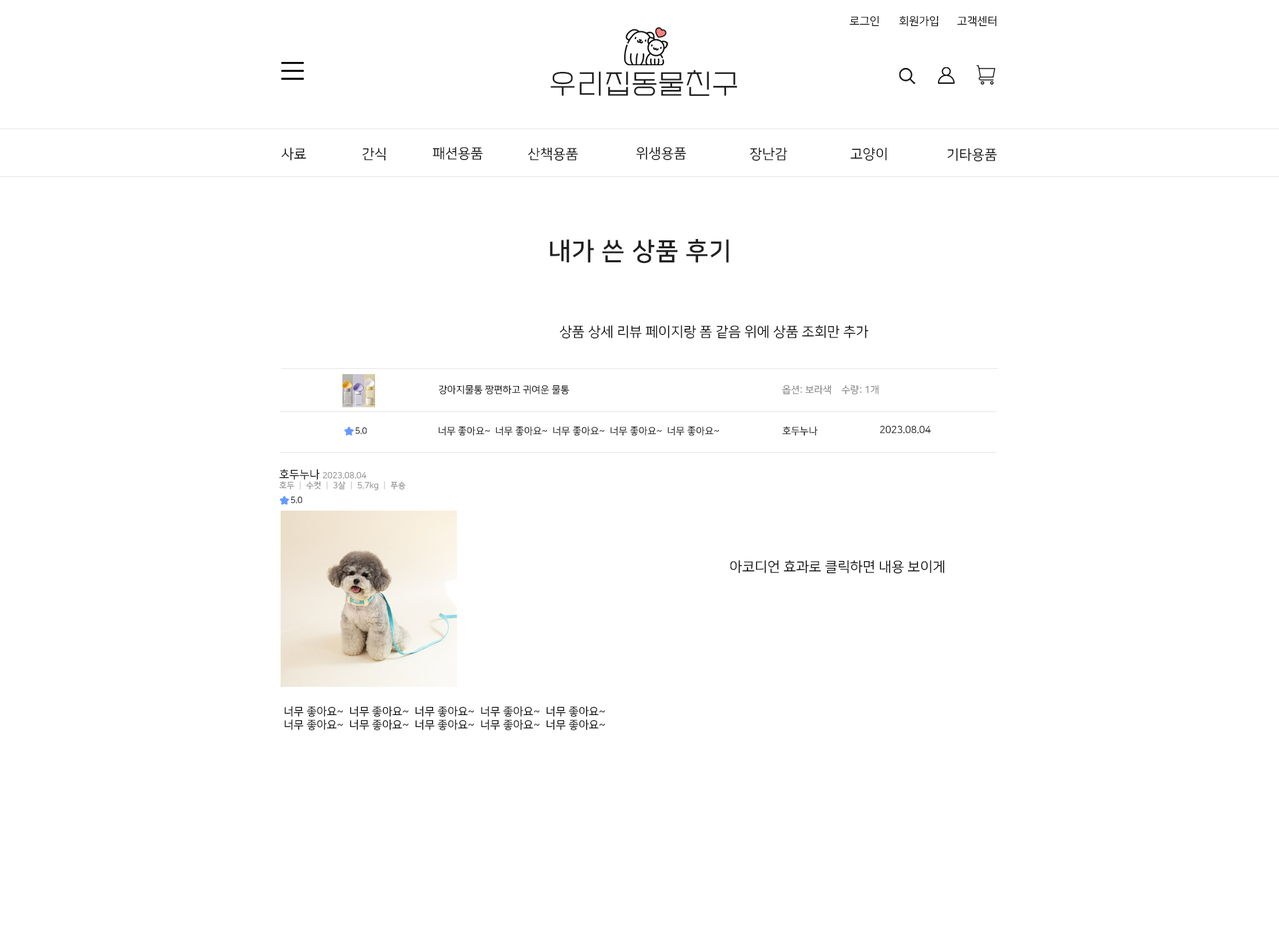
<style>
.page{position:relative;width:1279px;height:932px;background:#ffffff}
.page>*{position:absolute;margin:0}
.t1{font:11.1px "NanumSquareR";color:#000000}
.t2{font:27.8px "EF_watermelonSalad";letter-spacing:0.025em;color:#202020}
.t3{font:13.9px "NanumSquareR";color:#000000}
.t4{font:25px "NanumSquareB";letter-spacing:0.025em;color:#202020}
.t5{font:9.7px "NanumSquareR";color:#000000}
.t6{font:9.7px "NanumSquareR";color:#858585}
.t7{font:8.3px "NanumSquareR"}
.t8{font:8.3px "NanumSquareR";color:#8f8f8f}
.t9{font:8.3px "NanumSquareR";color:#d0d0d0}
</style>
<div class="page">
<p class="t1" style="left:849px;top:15px;width:30px;height:12px">로그인</p>
<p class="t1" style="left:899px;top:15px;width:39px;height:12px">회원가입</p>
<p class="t1" style="left:957px;top:15px;width:39px;height:12px">고객센터</p>
<p class="t2" style="left:550px;top:70px;width:187px;height:26px">우리집동물친구</p>
<p class="t3" style="left:281px;top:147px;width:25px;height:14px">사료</p>
<p class="t3" style="left:362px;top:147px;width:24px;height:14px">간식</p>
<p class="t3" style="left:432px;top:147px;width:51px;height:14px">패션용품</p>
<p class="t3" style="left:528px;top:147px;width:50px;height:14px">산책용품</p>
<p class="t3" style="left:636px;top:147px;width:50px;height:14px">위생용품</p>
<p class="t3" style="left:750px;top:147px;width:37px;height:14px">장난감</p>
<p class="t3" style="left:850px;top:147px;width:37px;height:14px">고양이</p>
<p class="t3" style="left:947px;top:148px;width:50px;height:14px">기타용품</p>
<p class="t4" style="left:549px;top:239px;width:180px;height:25px">내가 쓴 상품 후기</p>
<p class="t3" style="left:559px;top:325px;width:310px;height:14px">상품 상세 리뷰 페이지랑 폼 같음 위에 상품 조회만 추가</p>
<p class="t5" style="left:438px;top:385px;width:131px;height:10px">강아지물통 짱편하고 귀여운 물통</p>
<p class="t6" style="left:782px;top:385px;width:97px;height:10px">옵션: 보라색    수량: 1개</p>
<p class="t5" style="left:880px;top:426px;width:51px;height:8px">2023.08.04</p>
<p class="t7" style="left:355px;top:428px;width:12px;height:6px">5.0</p>
<p class="t5" style="left:438px;top:426px;width:281px;height:10px">너무 좋아요~  너무 좋아요~  너무 좋아요~  너무 좋아요~  너무 좋아요~</p>
<p class="t5" style="left:782px;top:426px;width:36px;height:10px">호두누나</p>
<p class="t8" style="left:279px;top:469px;width:127px;height:22px"><span class="t1">호두누나 </span>2023.08.04<br>호두 <span class="t9">ㅣ</span> 수컷 <span class="t9">ㅣ</span> 3살 <span class="t9">ㅣ</span> 5.7kg <span class="t9">ㅣ</span> 푸숑</p>
<p class="t7" style="left:290px;top:497px;width:12px;height:7px">5.0</p>
<p class="t3" style="left:730px;top:560px;width:214px;height:14px">아코디언 효과로 클릭하면 내용 보이게</p>
<p class="t1" style="left:284px;top:706px;width:321px;height:25px">너무 좋아요~  너무 좋아요~  너무 좋아요~  너무 좋아요~  너무 좋아요~ <br>너무 좋아요~  너무 좋아요~  너무 좋아요~  너무 좋아요~  너무 좋아요~</p>
</div>
